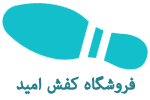
<style>
.page{position:relative;width:150px;height:100px;background:#ffffff}
.page>*{position:absolute;margin:0}
.t1{font:23px "AdobeArabic-Regular";color:#26818c;font-weight:bold}
</style>
<div class="page">
<p class="t1" style="left:16px;top:75px;width:119px;height:20px">فروشگاه کفش امید</p>
</div>
